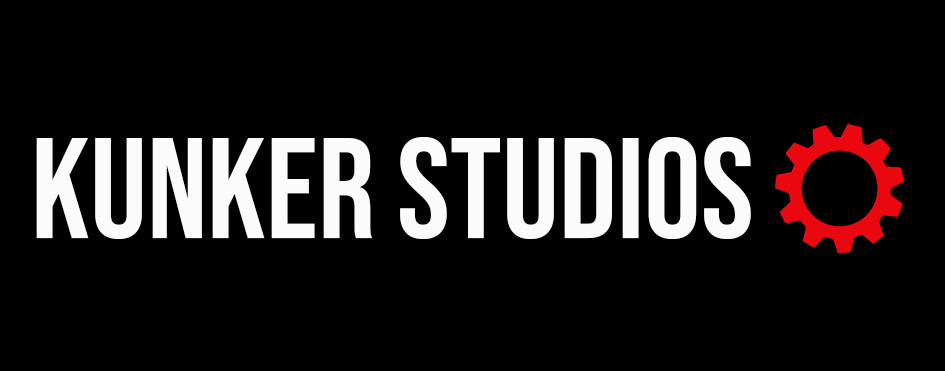
<style>
.page{position:relative;width:945px;height:371px;background:#000000}
.page>*{position:absolute;margin:0}
.t1{font:141.9px "BebasNeue-Regular";color:#fbfbfb}
</style>
<div class="page">
<p class="t1" style="left:36px;top:137px;width:715px;height:102px">kunker studios</p>
</div>
